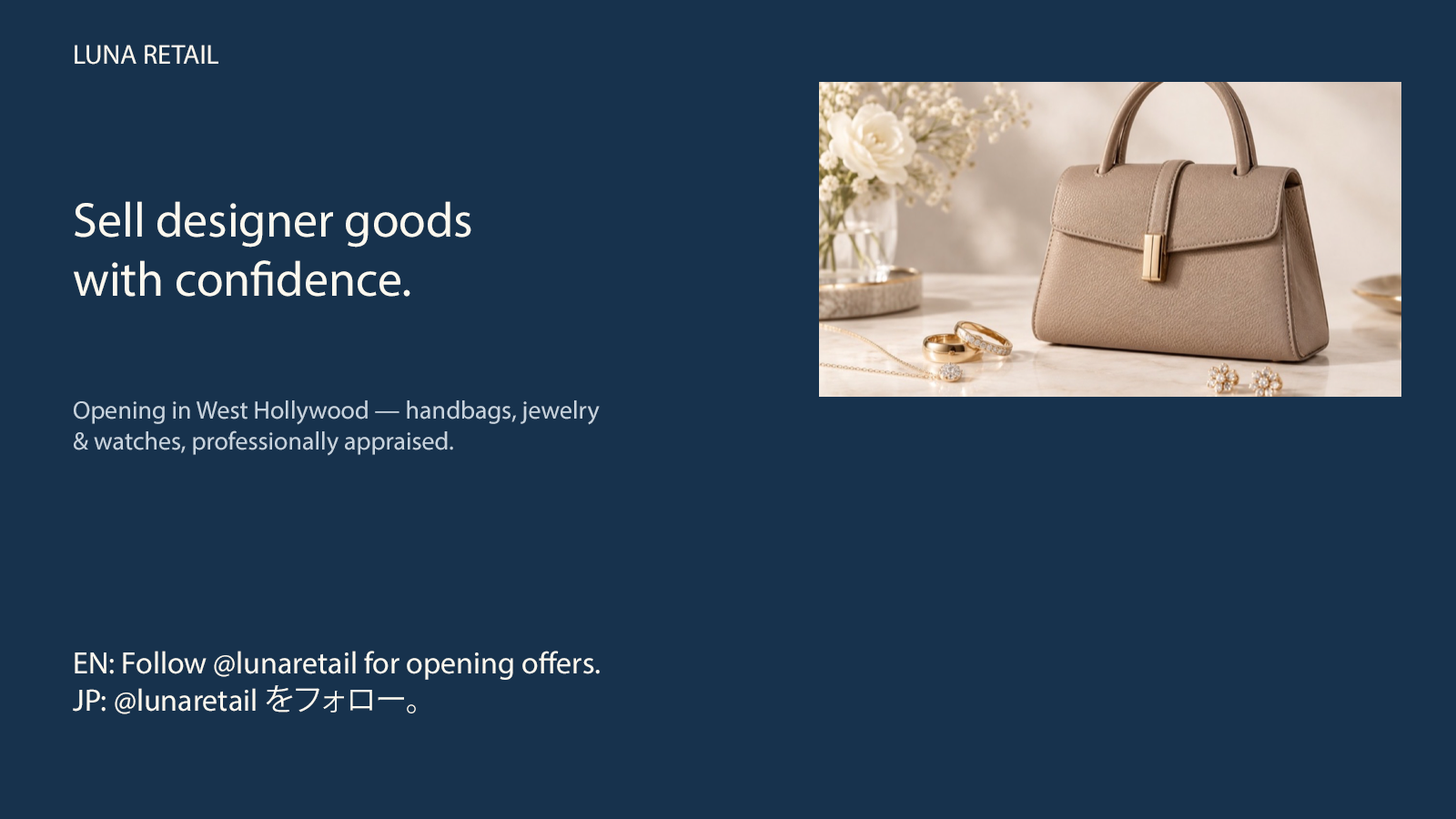
<style>
.page{position:relative;width:1456px;height:819px;background:#17324d}
.page>*{position:absolute;margin:0}
.t1{font:27.3px "MyriadPro-Regular";color:#fbf8ef}
.t2{font:49.1px "MyriadPro-Regular";color:#fbf8ef}
.t3{font:25.5px "MyriadPro-Regular";color:#c7d3de}
.t4{font:30.9px "MyriadPro-Regular";color:#fbf8ef}
.t5{font:30.9px "KozGoPr6N-Regular";color:#fbf8ef}
</style>
<div class="page">
<p class="t1" style="left:75px;top:45px;width:143px;height:20px">LUNA RETAIL</p>
<p class="t2" style="left:74px;top:201px;width:397px;height:96px">Sell designer goods<br>with confidence.</p>
<p class="t3" style="left:74px;top:400px;width:526px;height:56px">Opening in West Hollywood — handbags, jewelry<br>&amp; watches, professionally appraised.</p>
<p class="t4" style="left:73px;top:651px;width:527px;height:63px">EN: Follow @lunaretail for opening offers.<br>JP: @lunaretail <span class="t5">をフォロー。</span></p>
</div>
